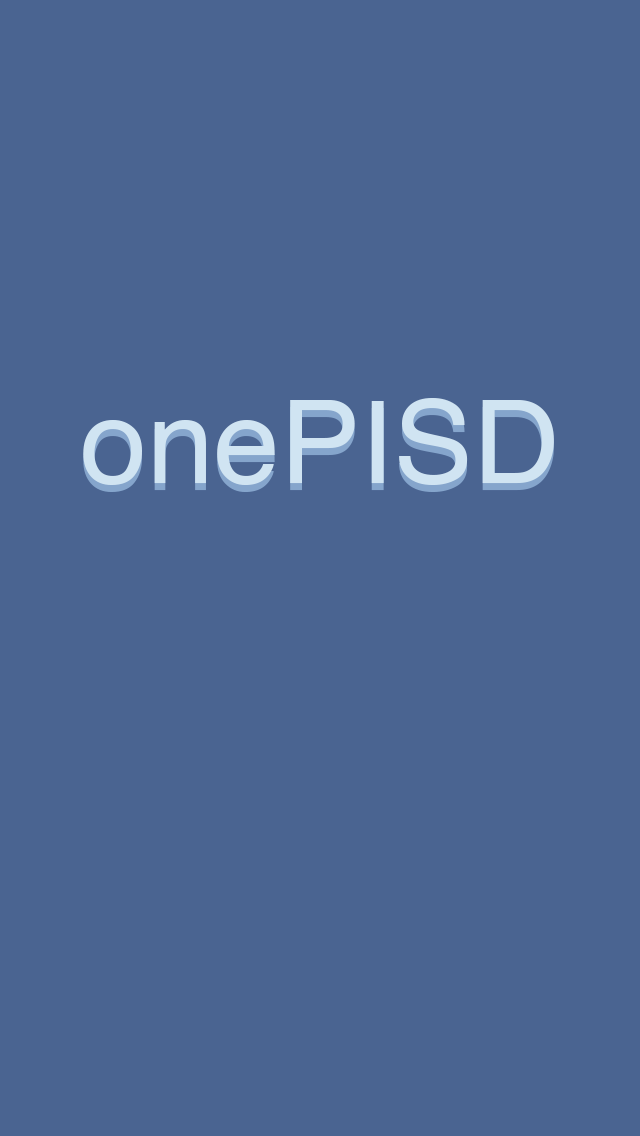
<style>
.page{position:relative;width:640px;height:1136px;background:#4a6491}
.page>*{position:absolute;margin:0}
.t1{font:114px "Helvetica";color:#d0e4f2;scale:1.05 1}
</style>
<div class="page">
<p class="t1" style="left:83px;top:398px;width:471px;height:87px">onePISD</p>
</div>
